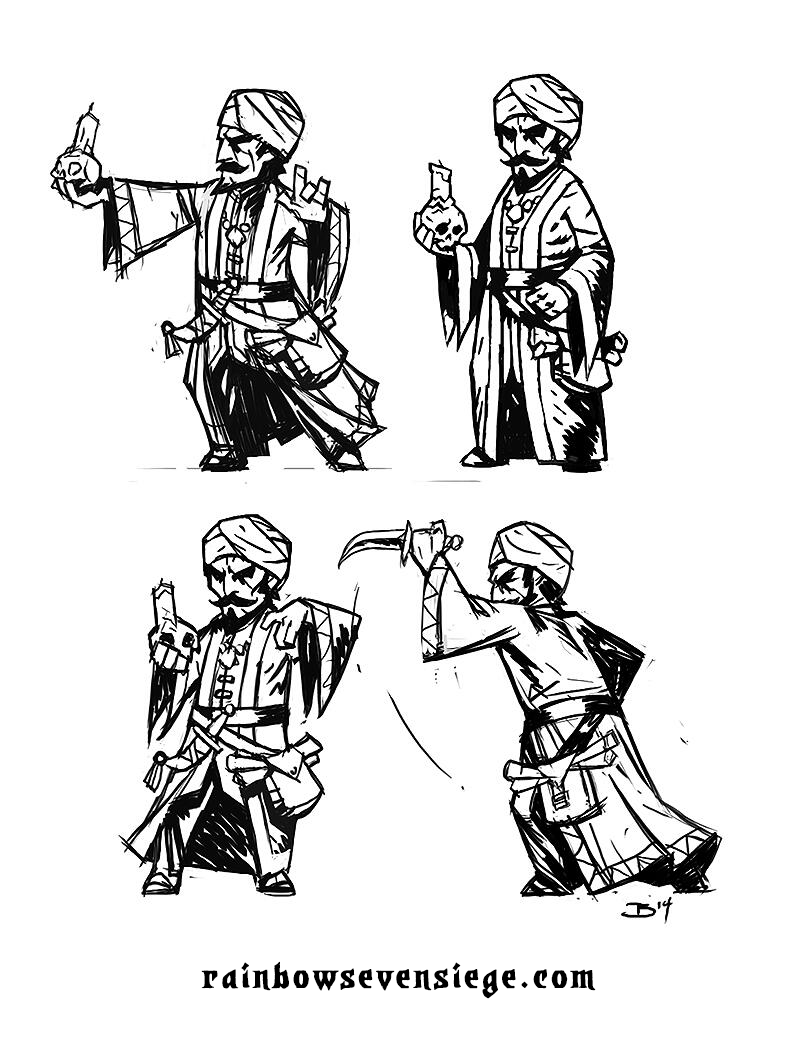
<style>
.page{position:relative;width:800px;height:1057px;background:#ffffff}
.page>*{position:absolute;margin:0}
.t1{font:40px "DwarvenAxeBBW00-Regular";letter-spacing:0.1em;color:#000000}
</style>
<div class="page">
<p class="t1" style="left:201px;top:961px;width:395px;height:38px">rainbowsevensiege.com</p>
</div>
